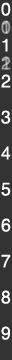
<style>
.page{position:relative;width:12px;height:360px;background:#333333}
.page>*{position:absolute;margin:0}
.t1{font:18px "Helvetica";color:#ffffff}
.t2{font:18px "Helvetica";color:#9a9a9a}
.t3{font:18px "Helvetica"}
</style>
<div class="page">
<p class="t1" style="left:1px;top:2px;width:10px;height:14px">0</p>
<p class="t2" style="left:1px;top:20px;width:10px;height:14px">0</p>
<p class="t2" style="left:2px;top:20px;width:6px;height:14px">1</p>
<p class="t1" style="left:2px;top:38px;width:6px;height:14px">1</p>
<p class="t3" style="left:1px;top:56px;width:10px;height:14px">2</p>
<p class="t3" style="left:2px;top:56px;width:6px;height:14px">1</p>
<p class="t1" style="left:1px;top:74px;width:10px;height:14px">2</p>
<p class="t1" style="left:1px;top:110px;width:10px;height:14px">3</p>
<p class="t1" style="left:1px;top:146px;width:10px;height:14px">4</p>
<p class="t1" style="left:1px;top:182px;width:10px;height:14px">5</p>
<p class="t1" style="left:1px;top:218px;width:10px;height:14px">6</p>
<p class="t1" style="left:1px;top:254px;width:10px;height:14px">7</p>
<p class="t1" style="left:1px;top:290px;width:10px;height:14px">8</p>
<p class="t1" style="left:1px;top:326px;width:9px;height:14px">9</p>
</div>
